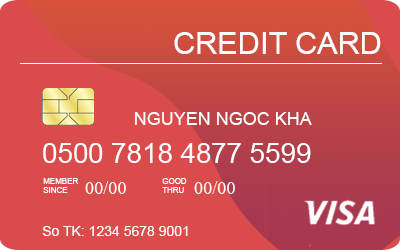
<style>
.page{position:relative;width:400px;height:250px;background:#da4b4b}
.page>*{position:absolute;margin:0}
.t1{font:30.8px "ArialMT";color:#fefefe}
.t2{font:18px "ArialMT";color:#fefefe}
.t3{font:27.9px "ArialMT";color:#fefefe}
.t4{font:8px "ArialMT";color:#ffffff}
.t5{font:18px "TimesNewRomanPSMT";color:#ffffff}
.t6{font:8px "ArialMT";color:#fefefe}
.t7{font:14px "ArialMT";color:#fefefe}
</style>
<div class="page">
<p class="t1" style="left:174px;top:32px;width:207px;height:22px">CREDIT CARD</p>
<p class="t2" style="left:135px;top:112px;width:177px;height:13px">NGUYEN NGOC KHA</p>
<p class="t3" style="left:43px;top:143px;width:268px;height:20px">0500 7818 4877 5599</p>
<p class="t4" style="left:43px;top:178px;width:36px;height:15px">MEMBER<br>SINCE</p>
<p class="t5" style="left:85px;top:181px;width:41px;height:13px">00/00</p>
<p class="t6" style="left:162px;top:178px;width:25px;height:15px">GOOD<br>THRU</p>
<p class="t5" style="left:194px;top:181px;width:41px;height:13px">00/00</p>
<p class="t7" style="left:42px;top:226px;width:146px;height:10px">So TK: 1234 5678 9001</p>
</div>
